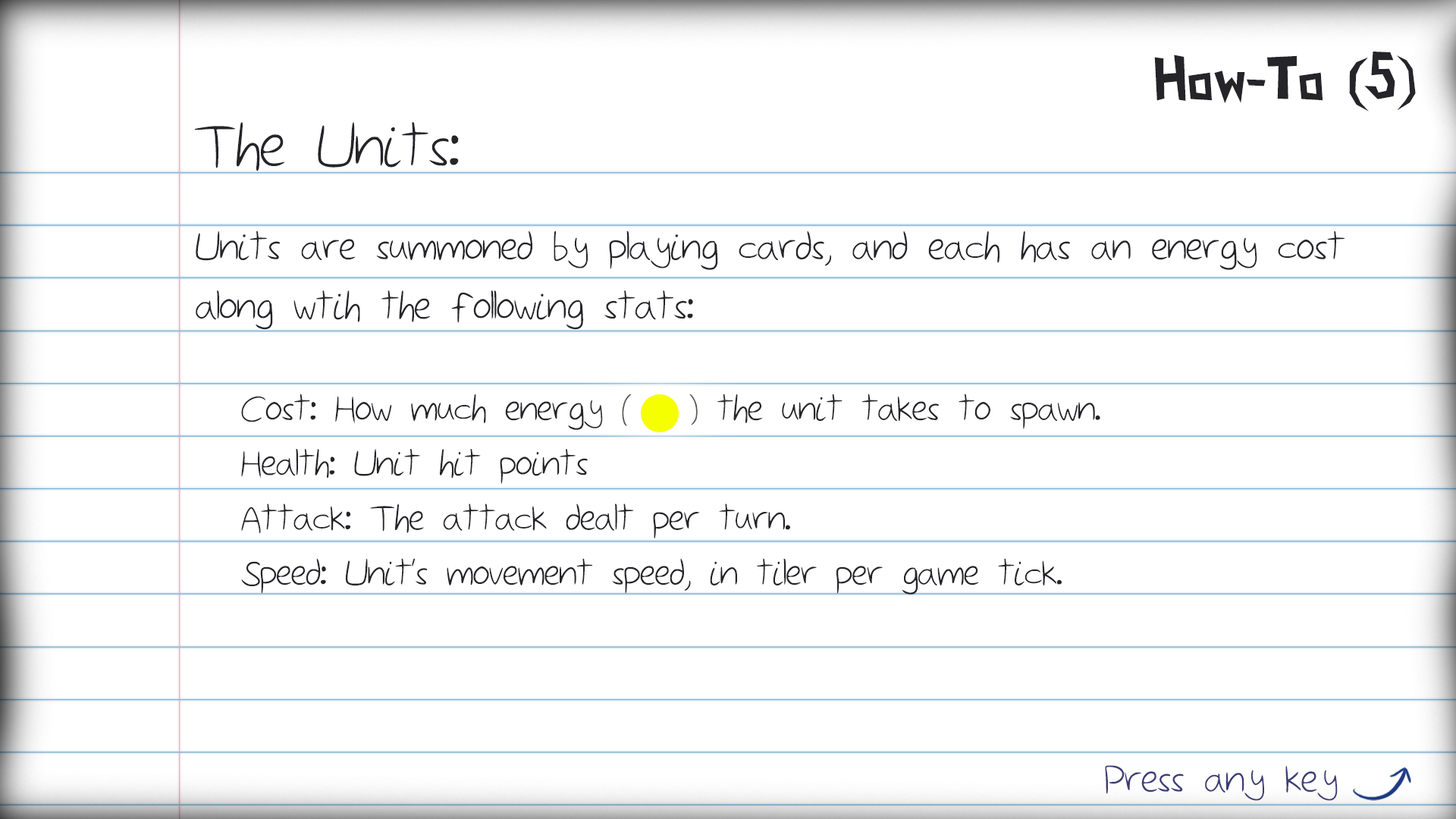
<style>
.page{position:relative;width:1456px;height:819px;background:#ffffff}
.page>*{position:absolute;margin:0}
.t1{font:59.4px "PaperCuts2";color:#242429}
.t2{font:76.9px "Sketchbook";color:#242429}
.t3{font:49.5px "Sketchbook";color:#242429}
.t4{font:45.7px "Sketchbook";color:#242429}
.t5{font:49.5px "Sketchbook";color:#3d3d78}
</style>
<div class="page">
<p class="t1" style="left:1154px;top:52px;width:262px;height:59px">How-To (5)</p>
<p class="t2" style="left:194px;top:122px;width:265px;height:49px">The Units:</p>
<p class="t3" style="left:196px;top:231px;width:1149px;height:99px">Units are summoned by playing cards, and each has an energy cost<br>along wtih the following stats:</p>
<p class="t4" style="left:241px;top:394px;width:859px;height:201px">Cost: How much energy (   ) the unit takes to spawn.<br>Health: Unit hit points<br>Attack: The attack dealt per turn.<br>Speed: Unit’s movement speed, in tiler per game tick.</p>
<p class="t5" style="left:1105px;top:765px;width:233px;height:36px">Press any key</p>
</div>
